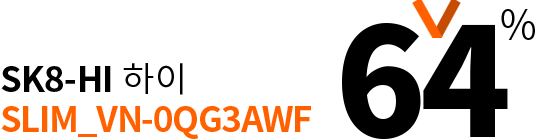
<style>
.page{position:relative;width:535px;height:140px;background:#ffffff}
.page>*{position:absolute;margin:0}
.t1{font:150px "SourceHanSansKR-Heavy";letter-spacing:-0.02em;color:#000000}
.t2{font:40px "SourceHanSansKR-Normal";letter-spacing:-0.02em;color:#000000}
.t3{font:35px/40px "SourceHanSansKR-Bold";letter-spacing:-0.04em;color:#ff6100}
.t4{font:35px/40px "SourceHanSansKR-Bold";letter-spacing:-0.02em;color:#000000}
.t5{font:35px/40px "SourceHanSansKR-Normal";letter-spacing:0.02em;color:#000000}
</style>
<div class="page">
<p class="t1" style="left:342px;top:9px;width:193px;height:130px">64<span class="t2">%</span></p>
<p class="t3" style="left:1px;top:63px;width:310px;height:76px"><span class="t4">SK8-HI</span><span class="t5"> 하이<br></span>SLIM_VN-0QG3AWF</p>
</div>
